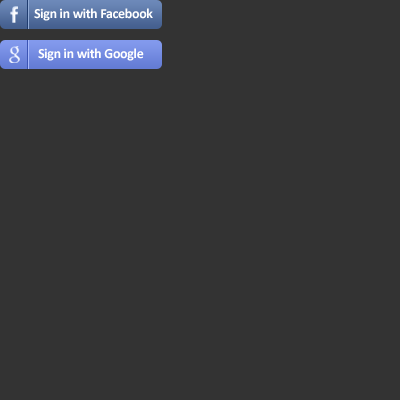
<style>
.page{position:relative;width:400px;height:400px;background:#333333}
.page>*{position:absolute;margin:0}
.t1{font:14px "Calibri-Bold";letter-spacing:-0.025em;color:#ffffff}
</style>
<div class="page">
<p class="t1" style="left:34px;top:8px;width:119px;height:13px">Sign in with Facebook</p>
<p class="t1" style="left:38px;top:48px;width:106px;height:13px">Sign in with Google</p>
</div>
